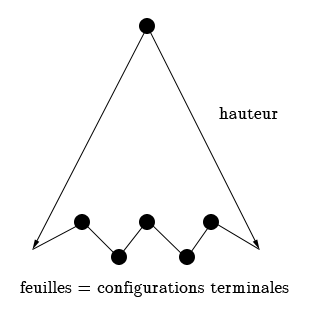
<style>
.page{position:relative;width:310px;height:310px;background:#ffffff}
.page>*{position:absolute;margin:0}
.t1{font:30px "CMUSerif-Roman";color:#000000}
</style>
<div class="page">
<p class="t1" style="left:219px;top:107px;width:59px;height:12px">hauteur</p>
<p class="t1" style="left:20px;top:281px;width:269px;height:16px">feuilles = configurations terminales</p>
</div>
